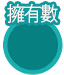
<style>
.page{position:relative;width:64px;height:75px;background:#078081}
.page>*{position:absolute;margin:0}
.t1{font:20px "GothicMB101Pr6N-Light";letter-spacing:-0.08em;color:#fff6f3;scale:0.9 1}
</style>
<div class="page">
<p class="t1" style="left:7px;top:3px;width:51px;height:20px">擁有數</p>
</div>
